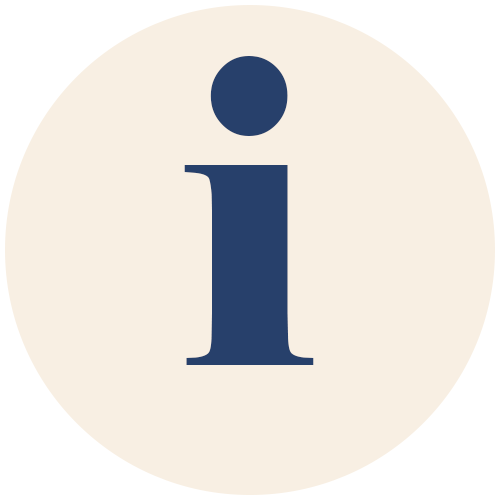
<style>
.page{position:relative;width:500px;height:500px;background:#f8efe3}
.page>*{position:absolute;margin:0}
.t1{font:420.9px "Elephant-Regular";color:#27406b;scale:0.93 1}
</style>
<div class="page">
<p class="t1" style="left:184px;top:56px;width:130px;height:309px">i</p>
</div>
